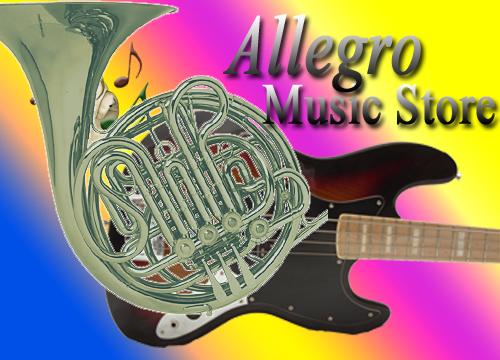
<style>
.page{position:relative;width:500px;height:360px}
.page>*{position:absolute;margin:0}
.t1{font:85px "TimesNewRomanPS-ItalicMT";font-weight:bold;scale:0.73 1}
.t2{font:57.4px "TimesNewRomanPSMT";font-weight:bold;scale:0.79 1}
</style>
<div class="page">
<p class="t1" style="left:223px;top:14px;width:198px;height:79px">Allegro</p>
<p class="t2" style="left:262px;top:83px;width:233px;height:42px">Music Store</p>
</div>
